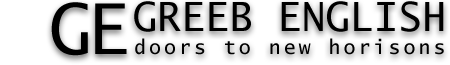
<style>
.page{position:relative;width:450px;height:65px;background:#ffffff}
.page>*{position:absolute;margin:0}
.t1{font:70px "LucidaSans-Typewriter";letter-spacing:-0.05em;color:#000000}
.t2{font:40px "LucidaSans-Typewriter";color:#000000}
.t3{font:20px "LucidaSans-Typewriter";letter-spacing:0.146em;color:#000000}
</style>
<div class="page">
<p class="t1" style="left:51px;top:2px;width:76px;height:54px">GE</p>
<p class="t2" style="left:134px;top:1px;width:310px;height:31px">GREEB ENGLISH</p>
<p class="t3" style="left:135px;top:38px;width:309px;height:17px">doors to new horisons</p>
</div>
